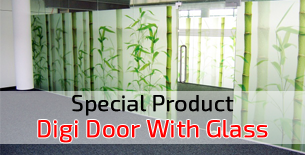
<style>
.page{position:relative;width:305px;height:155px}
.page>*{position:absolute;margin:0}
.t1{font:22px "Exo2.0-Light";color:#000000;font-weight:bold}
.t2{font:24px "Exo2.0-Light";color:#ff0000;font-weight:bold}
</style>
<div class="page">
<p class="t1" style="left:72px;top:95px;width:162px;height:21px">Special Product</p>
<p class="t2" style="left:38px;top:120px;width:230px;height:23px">Digi Door With Glass</p>
</div>
